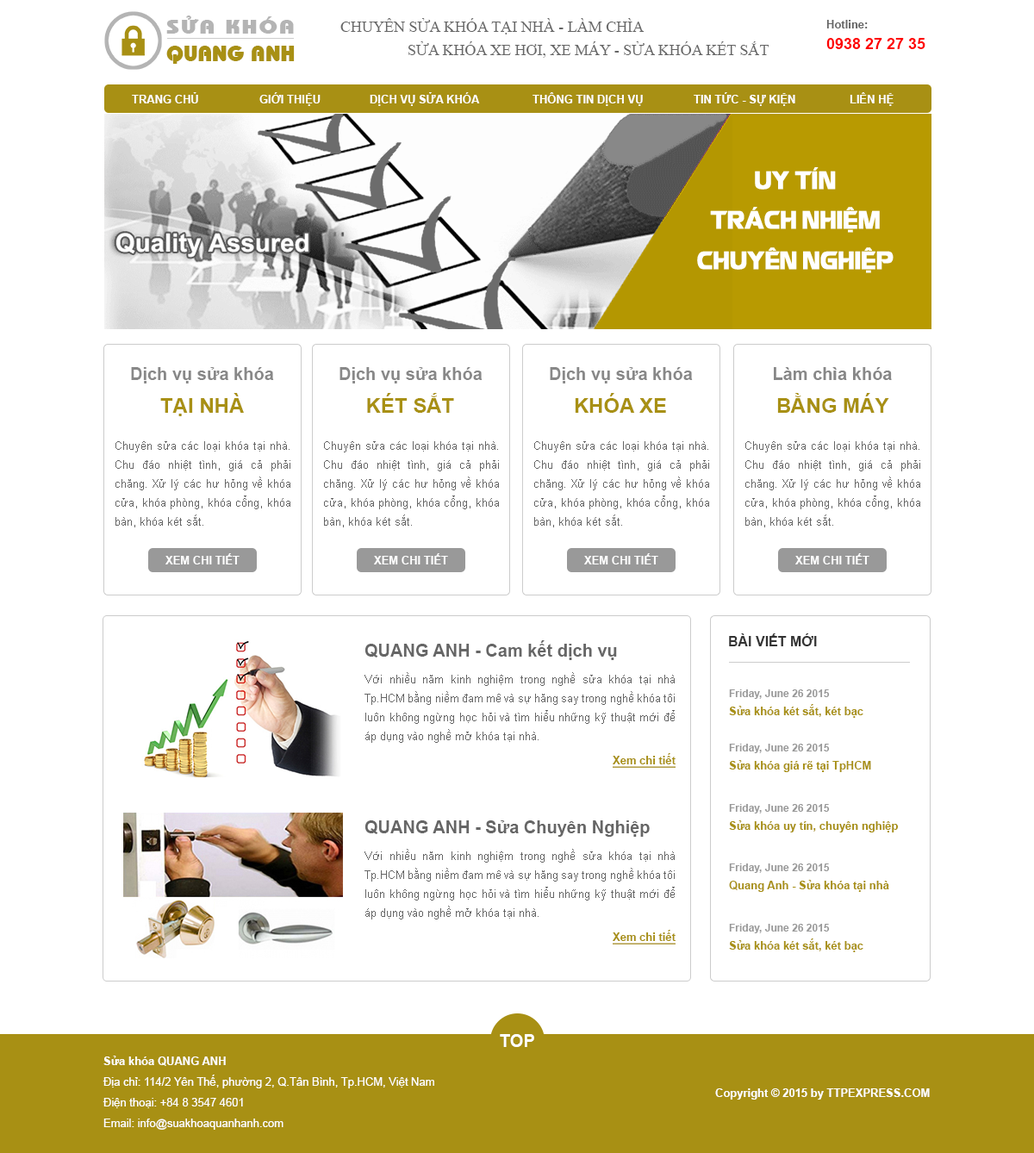
<style>
.page{position:relative;width:1034px;height:1153px;background:#ffffff}
.page>*{position:absolute;margin:0}
.t1{font:19px "UVNBaiSauNang";letter-spacing:0.075em;color:#b4b4b4;scale:1.26 1}
.t2{font:15.5px "TimesNewRomanPSMT";color:#666666}
.t3{font:11.2px "Arial-BoldMT";color:#666666}
.t4{font:15.5px "Arial-BoldMT";color:#fe0000}
.t5{font:22.6px "UVNBaiSauNang";color:#a89014}
.t6{font:11.2px "Arial-BoldMT";color:#ffffff}
.t7{font:17.2px "Arial-BoldMT";color:#888888}
.t8{font:20.7px "Arial-BoldMT";color:#a89014}
.t9{font:11.2px/19px "ArialMT";color:#666666}
.t10{font:11.2px "Arial-BoldMT";color:#ffffff;text-transform:uppercase}
.t11{font:17.2px "Arial-BoldMT";color:#666666}
.t12{font:13.8px "Arial-BoldMT";color:#333333;text-transform:uppercase}
.t13{font:10.3px "Arial-BoldMT";color:#999999}
.t14{font:11.2px "Arial-BoldMT";color:#a89014}
.t15{font:11.2px "Arial-BoldMT";color:#a89014;text-decoration:underline}
.t16{font:17.2px "Arial-BoldMT";color:#ffffff}
.t17{font:11.2px/20.7px "ArialMT";color:#ffffff}
.t18{font:11.2px/20.7px "Arial-BoldMT";color:#ffffff}
</style>
<div class="page">
<p class="t1" style="left:166px;top:16px;width:128px;height:18px">SỬA KHÓA</p>
<p class="t2" style="left:340px;top:18px;width:305px;height:16px">CHUYÊN SỬA KHÓA TẠI NHÀ - LÀM CHÌA</p>
<p class="t3" style="left:826px;top:20px;width:42px;height:8px">Hotline:</p>
<p class="t2" style="left:408px;top:41px;width:362px;height:17px">SỬA KHÓA XE HƠI, XE MÁY - SỬA KHÓA KÉT SẮT</p>
<p class="t4" style="left:826px;top:38px;width:100px;height:11px">0938 27 27 35</p>
<p class="t5" style="left:166px;top:46px;width:129px;height:18px">QUANG ANH</p>
<p class="t6" style="left:132px;top:92px;width:66px;height:11px">TRANG CHỦ</p>
<p class="t6" style="left:259px;top:92px;width:62px;height:14px">GIỚI THIỆU</p>
<p class="t6" style="left:370px;top:92px;width:110px;height:14px">DỊCH VỤ SỬA KHÓA</p>
<p class="t6" style="left:533px;top:92px;width:110px;height:14px">THÔNG TIN DỊCH VỤ</p>
<p class="t6" style="left:694px;top:92px;width:101px;height:14px">TIN TỨC - SỰ KIỆN</p>
<p class="t6" style="left:850px;top:92px;width:44px;height:14px">LIÊN HỆ</p>
<p class="t7" style="left:131px;top:367px;width:143px;height:16px">Dịch vụ sửa khóa</p>
<p class="t7" style="left:340px;top:367px;width:143px;height:16px">Dịch vụ sửa khóa</p>
<p class="t7" style="left:550px;top:367px;width:143px;height:16px">Dịch vụ sửa khóa</p>
<p class="t7" style="left:774px;top:367px;width:118px;height:13px">Làm chìa khóa</p>
<p class="t8" style="left:160px;top:393px;width:84px;height:23px">TẠI NHÀ</p>
<p class="t8" style="left:367px;top:393px;width:87px;height:20px">KÉT SẮT</p>
<p class="t8" style="left:575px;top:393px;width:91px;height:20px">KHÓA XE</p>
<p class="t8" style="left:777px;top:393px;width:112px;height:20px">BẰNG MÁY</p>
<p class="t9" style="left:115px;top:441px;width:175px;height:86px;text-align:justify">Chuyên sửa các loại khóa tại nhà. Chu đáo nhiệt tình, giá cả phải chăng. Xử lý các hư hỏng về khóa cửa, khóa phòng, khóa cổng, khóa bàn, khóa két sắt.</p>
<p class="t9" style="left:324px;top:441px;width:175px;height:86px;text-align:justify">Chuyên sửa các loại khóa tại nhà. Chu đáo nhiệt tình, giá cả phải chăng. Xử lý các hư hỏng về khóa cửa, khóa phòng, khóa cổng, khóa bàn, khóa két sắt.</p>
<p class="t9" style="left:534px;top:441px;width:175px;height:86px;text-align:justify">Chuyên sửa các loại khóa tại nhà. Chu đáo nhiệt tình, giá cả phải chăng. Xử lý các hư hỏng về khóa cửa, khóa phòng, khóa cổng, khóa bàn, khóa két sắt.</p>
<p class="t9" style="left:745px;top:441px;width:175px;height:86px;text-align:justify">Chuyên sửa các loại khóa tại nhà. Chu đáo nhiệt tình, giá cả phải chăng. Xử lý các hư hỏng về khóa cửa, khóa phòng, khóa cổng, khóa bàn, khóa két sắt.</p>
<p class="t10" style="left:165px;top:553px;width:75px;height:11px">Xem chi tiết</p>
<p class="t10" style="left:374px;top:553px;width:74px;height:11px">Xem chi tiết</p>
<p class="t10" style="left:584px;top:553px;width:74px;height:11px">Xem chi tiết</p>
<p class="t10" style="left:795px;top:553px;width:75px;height:11px">Xem chi tiết</p>
<p class="t11" style="left:365px;top:640px;width:252px;height:20px">QUANG ANH - Cam kết dịch vụ</p>
<p class="t12" style="left:729px;top:633px;width:88px;height:13px">BÀI VIẾT MỚI</p>
<p class="t9" style="left:365px;top:672px;width:310px;height:71px;text-align:justify">Với nhiều năm kinh nghiệm trong nghề sửa khóa tại nhà Tp.HCM bằng niềm đam mê và sự hăng say trong nghề khóa tôi luôn không ngừng học hỏi và tìm hiểu những kỹ thuật mới để áp dụng vào nghề mở khóa tại nhà.</p>
<p class="t13" style="left:729px;top:689px;width:101px;height:10px">Friday, June 26 2015</p>
<p class="t14" style="left:729px;top:704px;width:135px;height:14px">Sửa khóa két sắt, két bạc</p>
<p class="t13" style="left:729px;top:744px;width:101px;height:9px">Friday, June 26 2015</p>
<p class="t15" style="left:613px;top:753px;width:63px;height:15px">Xem chi tiết</p>
<p class="t14" style="left:729px;top:760px;width:142px;height:12px">Sửa khóa giá rẽ tại TpHCM</p>
<p class="t13" style="left:729px;top:804px;width:101px;height:10px">Friday, June 26 2015</p>
<p class="t11" style="left:365px;top:820px;width:285px;height:17px">QUANG ANH - Sửa Chuyên Nghiệp</p>
<p class="t14" style="left:729px;top:820px;width:170px;height:12px">Sửa khóa uy tín, chuyên nghiệp</p>
<p class="t9" style="left:365px;top:849px;width:310px;height:71px;text-align:justify">Với nhiều năm kinh nghiệm trong nghề sửa khóa tại nhà Tp.HCM bằng niềm đam mê và sự hăng say trong nghề khóa tôi luôn không ngừng học hỏi và tìm hiểu những kỹ thuật mới để áp dụng vào nghề mở khóa tại nhà.</p>
<p class="t13" style="left:729px;top:864px;width:101px;height:9px">Friday, June 26 2015</p>
<p class="t14" style="left:729px;top:880px;width:160px;height:12px">Quang Anh - Sửa khóa tại nhà</p>
<p class="t15" style="left:613px;top:930px;width:63px;height:15px">Xem chi tiết</p>
<p class="t13" style="left:729px;top:924px;width:101px;height:9px">Friday, June 26 2015</p>
<p class="t14" style="left:729px;top:938px;width:135px;height:14px">Sửa khóa két sắt, két bạc</p>
<p class="t16" style="left:500px;top:1034px;width:34px;height:13px">TOP</p>
<p class="t17" style="left:103px;top:1056px;width:331px;height:74px;text-align:justify"><span class="t18">Sửa khóa QUANG ANH<br></span>Địa chỉ: 114/2 Yên Thế, phường 2, Q.Tân Bình, Tp.HCM, Việt Nam<br>Điện thoại: +84 8 3547 4601 <br>Email: info@suakhoaquanhanh.com</p>
<p class="t6" style="left:715px;top:1088px;width:215px;height:12px">Copyright © 2015 by TTPEXPRESS.COM</p>
</div>
